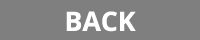
<style>
.page{position:relative;width:200px;height:40px;background:#7f7f7f}
.page>*{position:absolute;margin:0}
.t1{font:26.7px "OpenSans-Bold";color:#ffffff}
</style>
<div class="page">
<p class="t1" style="left:66px;top:11px;width:70px;height:21px">BACK</p>
</div>
